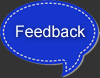
<style>
.page{position:relative;width:100px;height:78px;background:#333333}
.page>*{position:absolute;margin:0}
.t1{font:16px "ArialMT";color:#ffffff}
</style>
<div class="page">
<p class="t1" style="left:16px;top:25px;width:70px;height:13px">Feedback</p>
</div>
